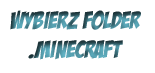
<style>
.page{position:relative;width:155px;height:73px;background:#ffffff}
.page>*{position:absolute;margin:0}
.t1{font:24px "BadaBoomBB"}
</style>
<div class="page">
<p class="t1" style="left:10px;top:10px;width:131px;height:50px;text-align:center">Wybierz folder<br>.minecraft</p>
</div>
